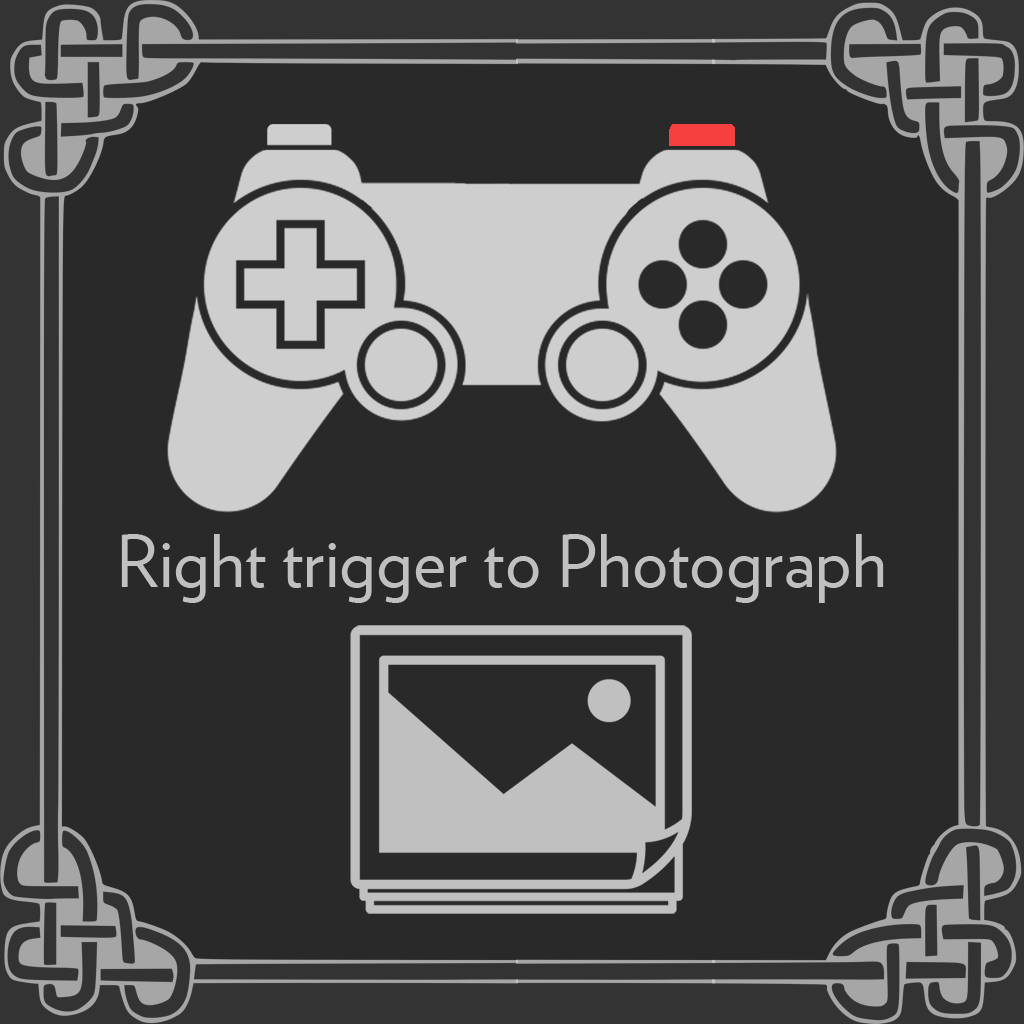
<style>
.page{position:relative;width:1024px;height:1024px;background:#292929}
.page>*{position:absolute;margin:0}
.t1{font:72px "Verlag-Book";color:#c0c0c0}
</style>
<div class="page">
<p class="t1" style="left:121px;top:534px;width:763px;height:69px">Right trigger to Photograph</p>
</div>
